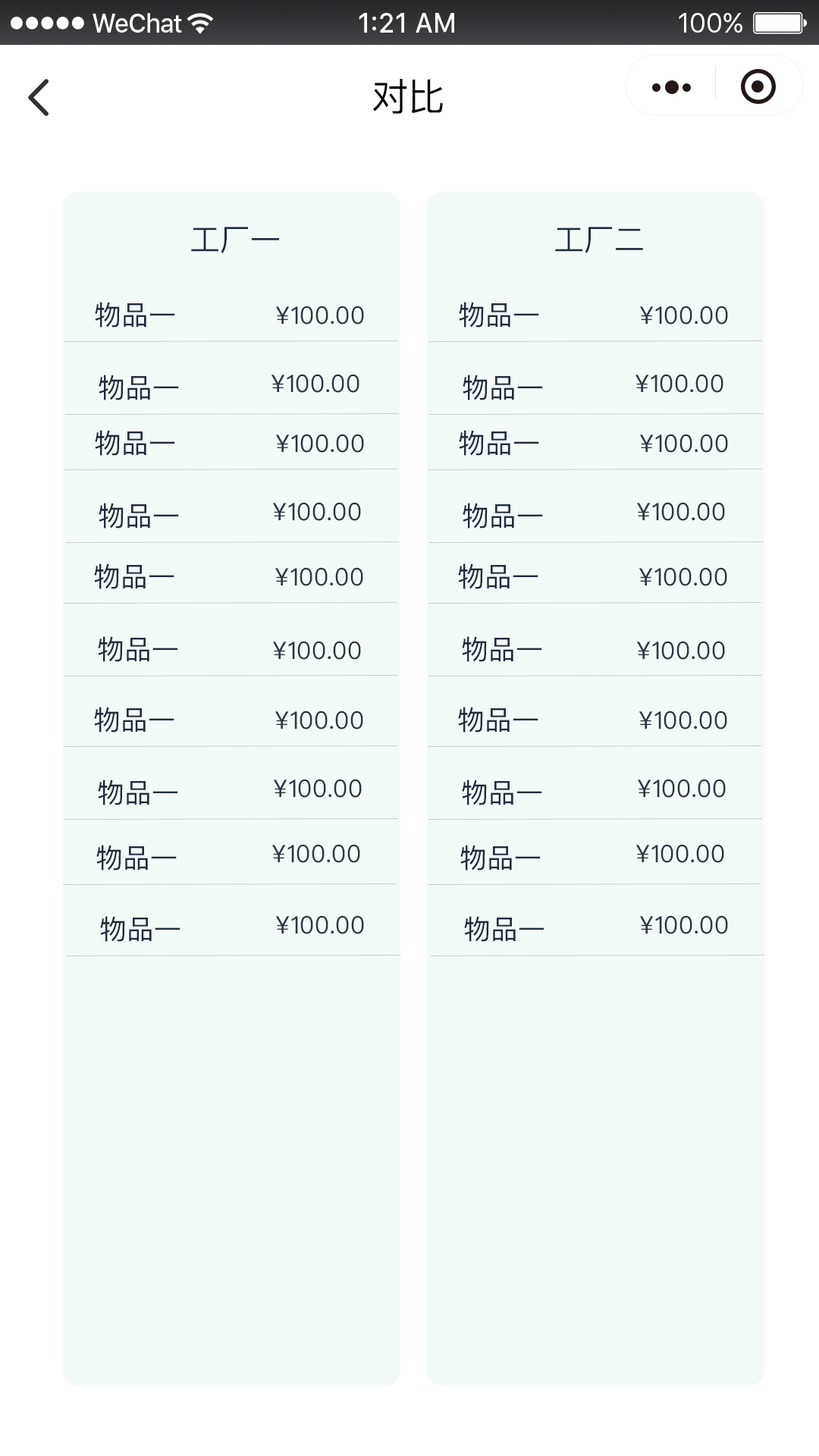
<style>
.page{position:relative;width:819px;height:1456px;background:#f3fbf9}
.page>*{position:absolute;margin:0}
.t1{font:37.9px "PingFangSC-Regular";color:#000000}
.t2{font:30.3px "PingFangSC-Regular";color:#1e2c3e}
.t3{font:27.3px "PingFangSC-Regular";color:#1e2c3e}
.t4{font:24.3px "PingFangSC-Regular";color:#2c3643}
</style>
<div class="page">
<p class="t1" style="left:373px;top:79px;width:70px;height:35px">对比</p>
<p class="t2" style="left:191px;top:227px;width:88px;height:26px">工厂一</p>
<p class="t2" style="left:555px;top:227px;width:88px;height:26px">工厂二</p>
<p class="t3" style="left:95px;top:302px;width:80px;height:26px">物品一</p>
<p class="t4" style="left:275px;top:306px;width:89px;height:19px">¥100.00</p>
<p class="t3" style="left:459px;top:302px;width:80px;height:26px">物品一</p>
<p class="t4" style="left:639px;top:306px;width:89px;height:19px">¥100.00</p>
<p class="t3" style="left:99px;top:375px;width:80px;height:25px">物品一</p>
<p class="t4" style="left:271px;top:374px;width:88px;height:19px">¥100.00</p>
<p class="t3" style="left:463px;top:375px;width:80px;height:25px">物品一</p>
<p class="t4" style="left:635px;top:374px;width:88px;height:19px">¥100.00</p>
<p class="t3" style="left:95px;top:430px;width:80px;height:26px">物品一</p>
<p class="t4" style="left:275px;top:434px;width:89px;height:19px">¥100.00</p>
<p class="t3" style="left:459px;top:430px;width:80px;height:26px">物品一</p>
<p class="t4" style="left:639px;top:434px;width:89px;height:19px">¥100.00</p>
<p class="t3" style="left:99px;top:503px;width:80px;height:26px">物品一</p>
<p class="t4" style="left:272px;top:502px;width:89px;height:19px">¥100.00</p>
<p class="t3" style="left:463px;top:503px;width:80px;height:26px">物品一</p>
<p class="t4" style="left:636px;top:502px;width:89px;height:19px">¥100.00</p>
<p class="t3" style="left:94px;top:563px;width:80px;height:26px">物品一</p>
<p class="t4" style="left:275px;top:567px;width:88px;height:19px">¥100.00</p>
<p class="t3" style="left:458px;top:563px;width:80px;height:26px">物品一</p>
<p class="t4" style="left:639px;top:567px;width:88px;height:19px">¥100.00</p>
<p class="t3" style="left:98px;top:636px;width:80px;height:26px">物品一</p>
<p class="t4" style="left:272px;top:641px;width:89px;height:19px">¥100.00</p>
<p class="t3" style="left:462px;top:636px;width:80px;height:26px">物品一</p>
<p class="t4" style="left:636px;top:641px;width:89px;height:19px">¥100.00</p>
<p class="t3" style="left:94px;top:707px;width:80px;height:26px">物品一</p>
<p class="t4" style="left:275px;top:711px;width:88px;height:19px">¥100.00</p>
<p class="t3" style="left:458px;top:707px;width:80px;height:26px">物品一</p>
<p class="t4" style="left:639px;top:711px;width:88px;height:19px">¥100.00</p>
<p class="t3" style="left:98px;top:780px;width:80px;height:25px">物品一</p>
<p class="t4" style="left:273px;top:779px;width:89px;height:19px">¥100.00</p>
<p class="t3" style="left:462px;top:780px;width:80px;height:25px">物品一</p>
<p class="t4" style="left:637px;top:779px;width:89px;height:19px">¥100.00</p>
<p class="t3" style="left:96px;top:845px;width:81px;height:26px">物品一</p>
<p class="t4" style="left:271px;top:844px;width:89px;height:19px">¥100.00</p>
<p class="t3" style="left:460px;top:845px;width:81px;height:26px">物品一</p>
<p class="t4" style="left:635px;top:844px;width:89px;height:19px">¥100.00</p>
<p class="t3" style="left:100px;top:916px;width:80px;height:26px">物品一</p>
<p class="t4" style="left:275px;top:915px;width:89px;height:19px">¥100.00</p>
<p class="t3" style="left:464px;top:916px;width:80px;height:26px">物品一</p>
<p class="t4" style="left:639px;top:915px;width:89px;height:19px">¥100.00</p>
</div>
